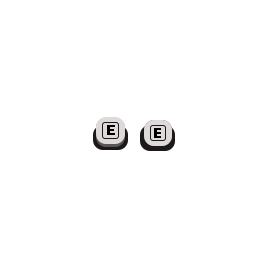
<style>
.page{position:relative;width:256px;height:256px;background:#ffffff}
.page>*{position:absolute;margin:0}
.t1{font:22.6px "Rajdhani-Bold";letter-spacing:0.03em;color:#000000;font-variant:small-caps;font-weight:bold;scale:1.11 1}
.t2{font:21.7px "Rajdhani-Bold";letter-spacing:0.03em;color:#000000;font-variant:small-caps;font-weight:bold;scale:1.11 1}
</style>
<div class="page">
<p class="t1" style="left:107px;top:125px;width:8px;height:10px">e</p>
<p class="t2" style="left:154px;top:128px;width:7px;height:10px">e</p>
</div>
